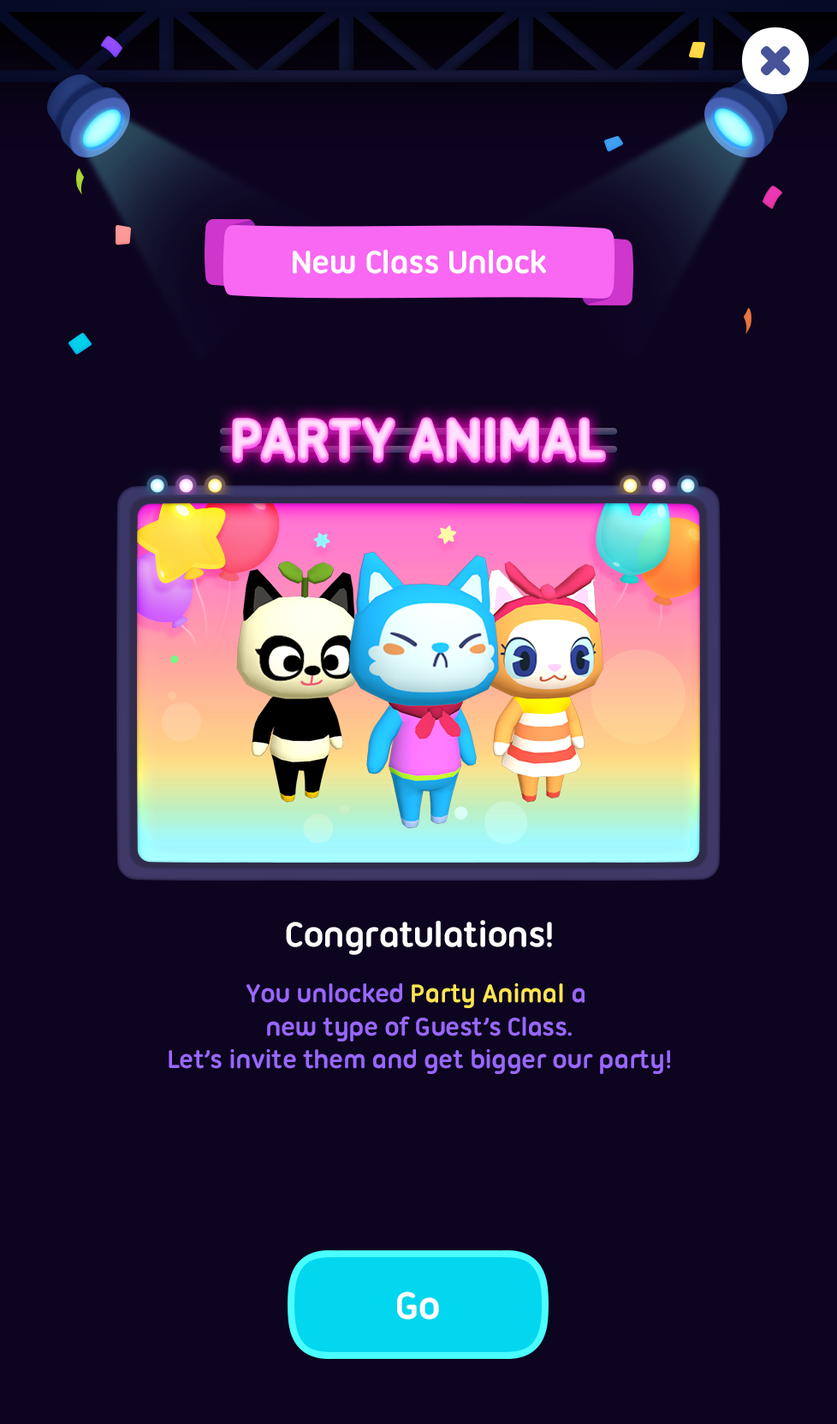
<style>
.page{position:relative;width:837px;height:1424px;background:#0d0420}
.page>*{position:absolute;margin:0}
.t1{font:34.2px "UbuntuTitling-Bold";letter-spacing:-0.025em;color:#ffffff}
.t2{font:59.9px "UbuntuTitling-Bold";letter-spacing:-0.04em;color:#ffd3fa;text-transform:uppercase;font-weight:bold}
.t3{font:59.9px "UbuntuTitling-Bold";letter-spacing:-0.04em;color:#ffe0fd;text-transform:uppercase;font-weight:bold}
.t4{font:37.7px "UbuntuTitling-Bold";letter-spacing:-0.025em;color:#ffffff}
.t5{font:27.4px "UbuntuTitling-Bold";letter-spacing:-0.025em;color:#9967ff}
.t6{font:27.4px "UbuntuTitling-Bold";letter-spacing:-0.025em;color:#ffe552}
.t7{font:41.1px "UbuntuTitling-Bold";letter-spacing:-0.025em;color:#ffffff}
</style>
<div class="page">
<p class="t1" style="left:293px;top:249px;width:253px;height:25px">New Class Unlock</p>
<p class="t2" style="left:233px;top:420px;width:372px;height:42px">Party Animal</p>
<p class="t3" style="left:233px;top:418px;width:372px;height:42px">Party Animal</p>
<p class="t4" style="left:286px;top:920px;width:266px;height:35px">Congratulations!</p>
<p class="t5" style="left:169px;top:984px;width:501px;height:90px;text-align:center">You unlocked <span class="t6">Party Animal </span>a <br>new type of Guest’s Class.<br>Let’s invite them and get bigger our party!</p>
<p class="t7" style="left:397px;top:1292px;width:42px;height:28px">Go</p>
</div>
